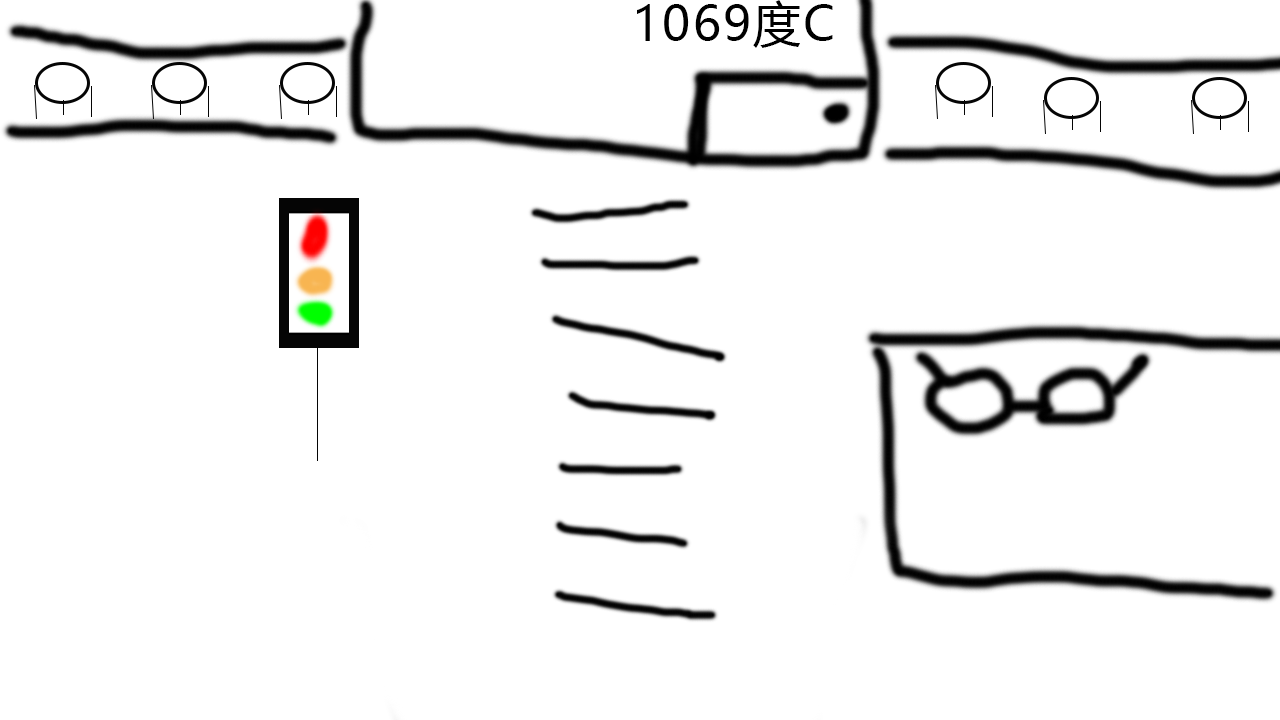
<style>
.page{position:relative;width:1280px;height:720px;background:#ffffff}
.page>*{position:absolute;margin:0}
.t1{font:48px "MicrosoftYaHei";letter-spacing:0.04em;color:#000000}
</style>
<div class="page">
<p class="t1" style="left:637px;top:0px;width:196px;height:48px">1069度C</p>
</div>
